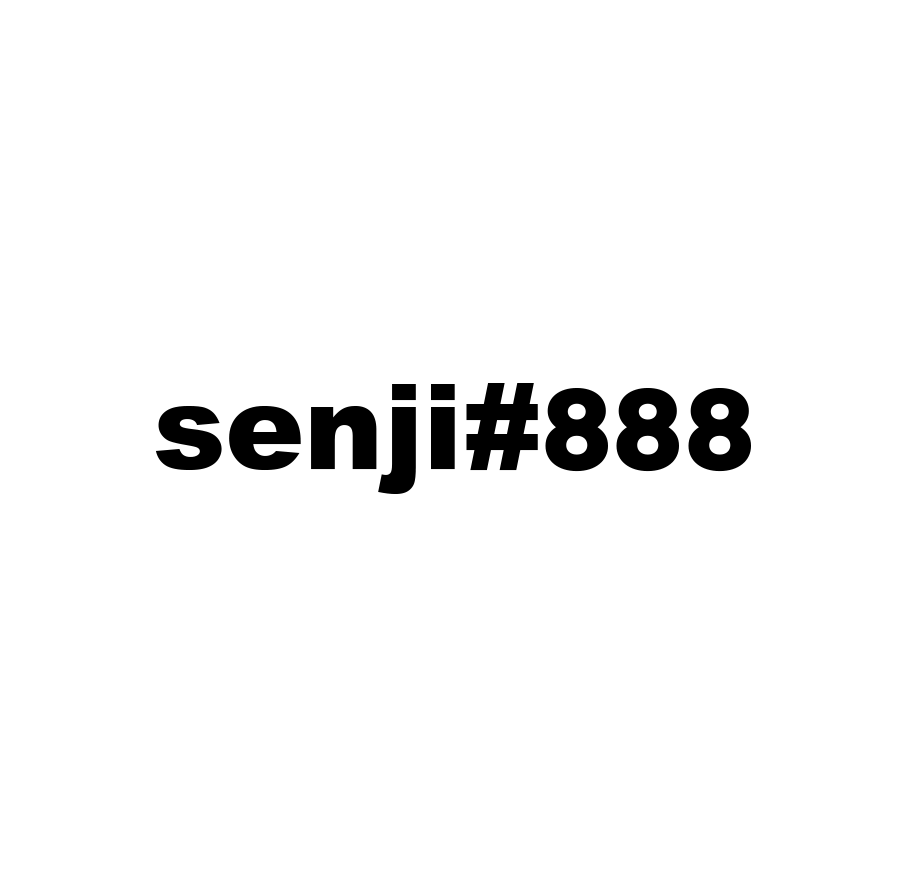
<style>
.page{position:relative;width:908px;height:874px;background:#ffffff}
.page>*{position:absolute;margin:0}
.t1{font:118.7px "Arial-Black";color:#000000}
.t2{font:118.7px "Mont-HeavyDEMO";color:#000000}
</style>
<div class="page">
<p class="t1" style="left:155px;top:383px;width:596px;height:111px">senji#<span class="t2">888</span></p>
</div>
